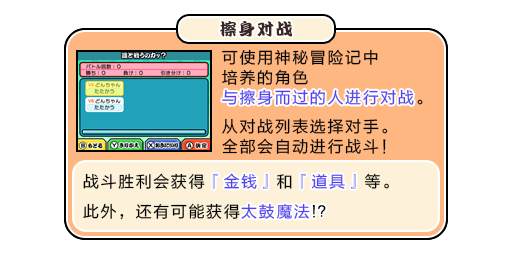
<style>
.page{position:relative;width:512px;height:256px;background:#ffffff}
.page>*{position:absolute;margin:0}
.t1{font:17px "DFPKanTingLiuW9";letter-spacing:0.1em;color:#3b2626}
.t2{font:16px/20px "FZLTHJW--GB1-0";letter-spacing:0.1em;color:#000000}
.t3{font:16px/20px "FZLTHJW--GB1-0";letter-spacing:0.1em;color:#5444ed}
.t4{font:16px "FZLTHJW--GB1-0";letter-spacing:0.1em;color:#5444ed}
.t5{font:16px/30px "FZLTHJW--GB1-0";letter-spacing:0.1em;color:#000000}
.t6{font:16px/30px "FZLTHJW--GB1-0";letter-spacing:0.1em;color:#5444ed}
</style>
<div class="page">
<p class="t1" style="left:220px;top:21px;width:72px;height:16px">擦身对战</p>
<p class="t2" style="left:222px;top:49px;width:201px;height:56px">可使用神秘冒险记中<br>培养的角色<br><span class="t3">与擦身而过的人进行对战</span>。</p>
<p class="t4" style="left:222px;top:89px;width:192px;height:16px">与擦身而过的人进行对战</p>
<p class="t2" style="left:222px;top:118px;width:166px;height:36px">从对战列表选择对手。<br>全部会自动进行战斗！</p>
<p class="t5" style="left:83px;top:173px;width:306px;height:47px">战斗胜利会获得<span class="t6">『金钱』</span>和<span class="t6">『道具』</span>等。<br>此外，还有可能获得<span class="t6">太鼓魔法</span>!？</p>
<p class="t6" style="left:212px;top:173px;width:144px;height:46px">『金钱』　『道具』<br>　　太鼓魔法<span class="t5">!？</span></p>
</div>
